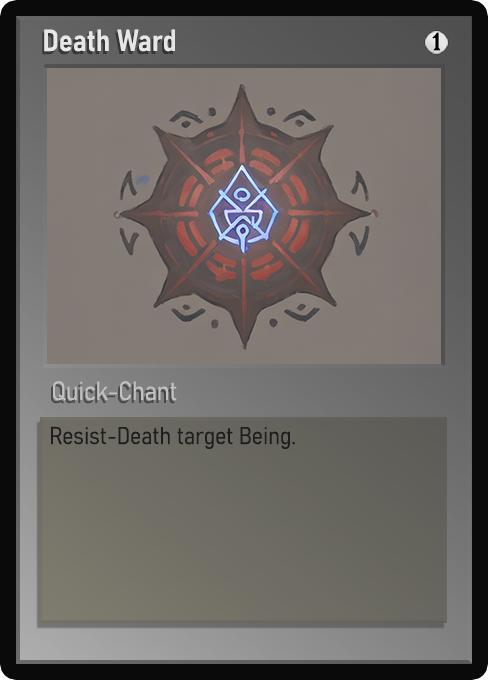
<style>
.page{position:relative;width:488px;height:680px}
.page>*{position:absolute;margin:0}
.t1{font:30px "Bahnschrift-SemiBoldSemiCondensed";color:#f2f2f2;font-weight:bold}
.t2{font:25px "WTRRoycroft";color:#000000;font-weight:bold;scale:1.09 1}
.t3{font:26px "Bahnschrift-LightSemiCondensed";color:#c8c8c8;font-weight:bold}
.t4{font:24px "Bahnschrift-LightSemiCondensed";color:#1e1e1e;font-weight:bold}
</style>
<div class="page">
<p class="t1" style="left:44px;top:29px;width:131px;height:23px;opacity:0.9">Death Ward</p>
<p class="t2" style="left:432px;top:32px;width:9px;height:19px">1</p>
<p class="t3" style="left:53px;top:381px;width:124px;height:20px;opacity:0.9">Quick-Chant</p>
<p class="t4" style="left:51px;top:426px;width:244px;height:23px">Resist-Death target Being.</p>
</div>
